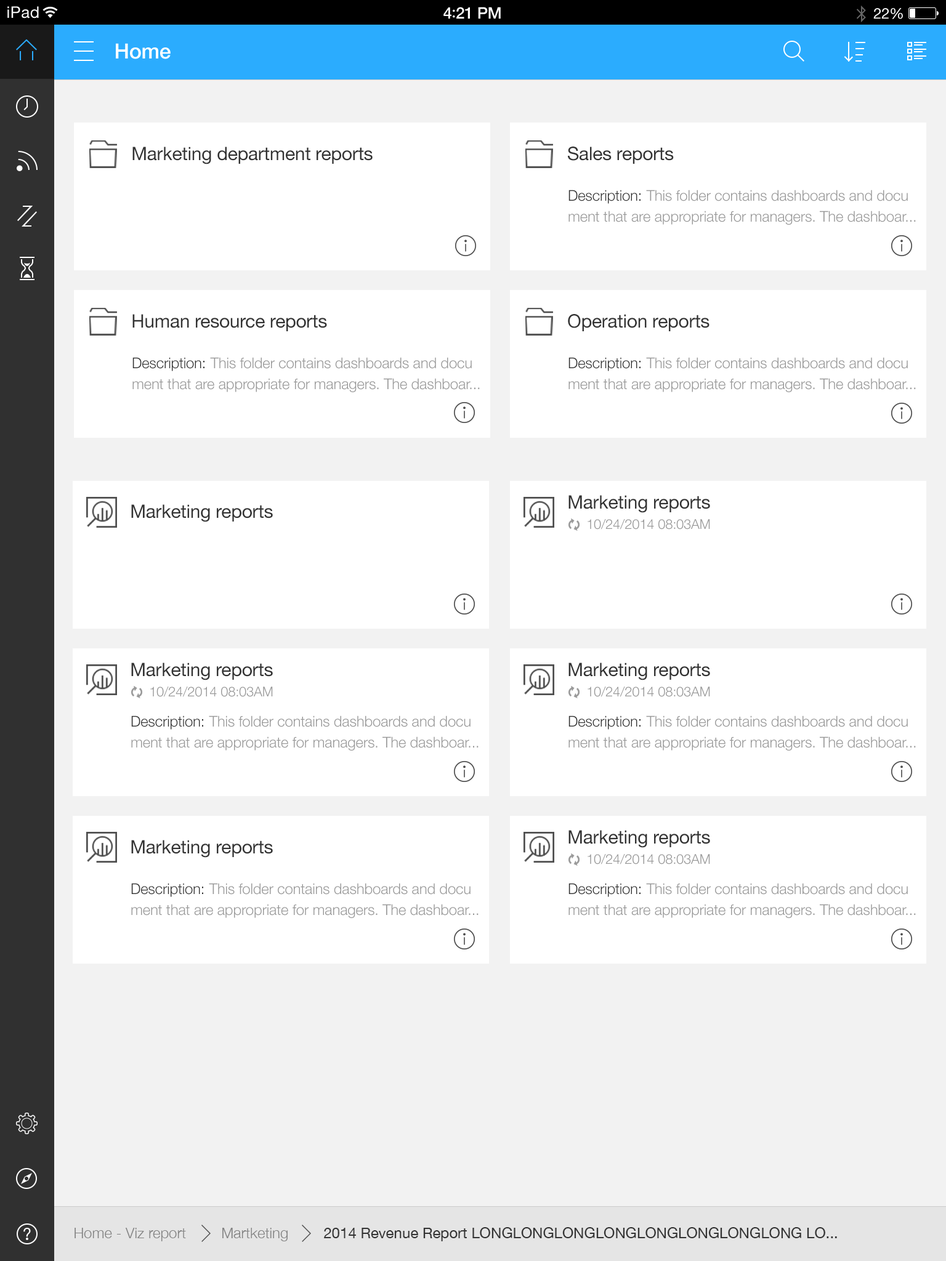
<style>
.page{position:relative;width:946px;height:1261px;background:#ffffff}
.page>*{position:absolute;margin:0}
.t1{font:16px "HelveticaNeue";letter-spacing:0.02em;color:#ffffff}
.t2{font:16px "HelveticaNeue-Medium";letter-spacing:-0.02em;color:#ffffff}
.t3{font:16px "Avenir-Medium";letter-spacing:-0.02em;color:#ffffff}
.t4{font:14.8px "HelveticaNeue";letter-spacing:-0.02em;color:#ffffff}
.t5{font:20.9px "HelveticaNeue-Medium";letter-spacing:-0.01em;color:#ffffff}
.t6{font:18.5px "HelveticaNeue";letter-spacing:-0.01em;color:#333333}
.t7{font:14.8px/20.9px "HelveticaNeue-Light";letter-spacing:-0.01em;color:#999999}
.t8{font:14.8px/20.9px "HelveticaNeue-Light";letter-spacing:-0.01em;color:#333333}
.t9{font:13.5px "HelveticaNeue-Light";letter-spacing:-0.01em;color:#999999}
.t10{font:14.8px "HelveticaNeue-Light";color:#828282}
.t11{font:14.8px "HelveticaNeue";color:#333333}
</style>
<div class="page">
<p class="t1" style="left:7px;top:6px;width:32px;height:12px">iPad</p>
<p class="t2" style="left:443px;top:7px;width:58px;height:12px">4<span class="t3">:</span>21 PM</p>
<p class="t4" style="left:873px;top:8px;width:30px;height:11px">22%</p>
<p class="t5" style="left:116px;top:43px;width:55px;height:16px">Home</p>
<p class="t6" style="left:132px;top:147px;width:240px;height:17px">Marketing department reports</p>
<p class="t6" style="left:568px;top:147px;width:106px;height:17px">Sales reports</p>
<p class="t7" style="left:568px;top:190px;width:348px;height:35px"><span class="t8">Description: </span>This folder contains dashboards and docu<br>ment that are appropriate for managers. The dashboar...</p>
<p class="t6" style="left:132px;top:314px;width:195px;height:17px">Human resource reports</p>
<p class="t6" style="left:568px;top:314px;width:141px;height:17px">Operation reports</p>
<p class="t7" style="left:132px;top:357px;width:348px;height:35px"><span class="t8">Description: </span>This folder contains dashboards and docu<br>ment that are appropriate for managers. The dashboar...</p>
<p class="t7" style="left:568px;top:357px;width:348px;height:35px"><span class="t8">Description: </span>This folder contains dashboards and docu<br>ment that are appropriate for managers. The dashboar...</p>
<p class="t6" style="left:568px;top:495px;width:142px;height:18px">Marketing reports</p>
<p class="t6" style="left:131px;top:504px;width:142px;height:18px">Marketing reports</p>
<p class="t9" style="left:587px;top:519px;width:123px;height:10px">10/24/2014 08:03AM</p>
<p class="t6" style="left:131px;top:662px;width:142px;height:18px">Marketing reports</p>
<p class="t6" style="left:568px;top:662px;width:142px;height:18px">Marketing reports</p>
<p class="t9" style="left:150px;top:686px;width:123px;height:11px">10/24/2014 08:03AM</p>
<p class="t9" style="left:587px;top:686px;width:123px;height:11px">10/24/2014 08:03AM</p>
<p class="t7" style="left:131px;top:715px;width:347px;height:36px"><span class="t8">Description: </span>This folder contains dashboards and docu<br>ment that are appropriate for managers. The dashboar...</p>
<p class="t7" style="left:568px;top:715px;width:348px;height:36px"><span class="t8">Description: </span>This folder contains dashboards and docu<br>ment that are appropriate for managers. The dashboar...</p>
<p class="t6" style="left:568px;top:830px;width:142px;height:18px">Marketing reports</p>
<p class="t6" style="left:131px;top:840px;width:142px;height:18px">Marketing reports</p>
<p class="t9" style="left:587px;top:854px;width:123px;height:10px">10/24/2014 08:03AM</p>
<p class="t7" style="left:131px;top:883px;width:347px;height:35px"><span class="t8">Description: </span>This folder contains dashboards and docu<br>ment that are appropriate for managers. The dashboar...</p>
<p class="t7" style="left:568px;top:883px;width:348px;height:35px"><span class="t8">Description: </span>This folder contains dashboards and docu<br>ment that are appropriate for managers. The dashboar...</p>
<p class="t10" style="left:74px;top:1228px;width:112px;height:13px">Home - Viz report</p>
<p class="t10" style="left:222px;top:1228px;width:66px;height:13px">Martketing</p>
<p class="t11" style="left:324px;top:1227px;width:513px;height:14px">2014 Revenue Report LONGLONGLONGLONGLONGLONGLONGLONG LO...</p>
</div>
